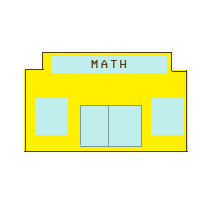
<style>
.page{position:relative;width:200px;height:200px;background:#ffffff}
.page>*{position:absolute;margin:0}
.t1{font:12px "SynchroLET";letter-spacing:0.2em;color:#553e15}
</style>
<div class="page">
<p class="t1" style="left:91px;top:60px;width:36px;height:8px">Math</p>
</div>
